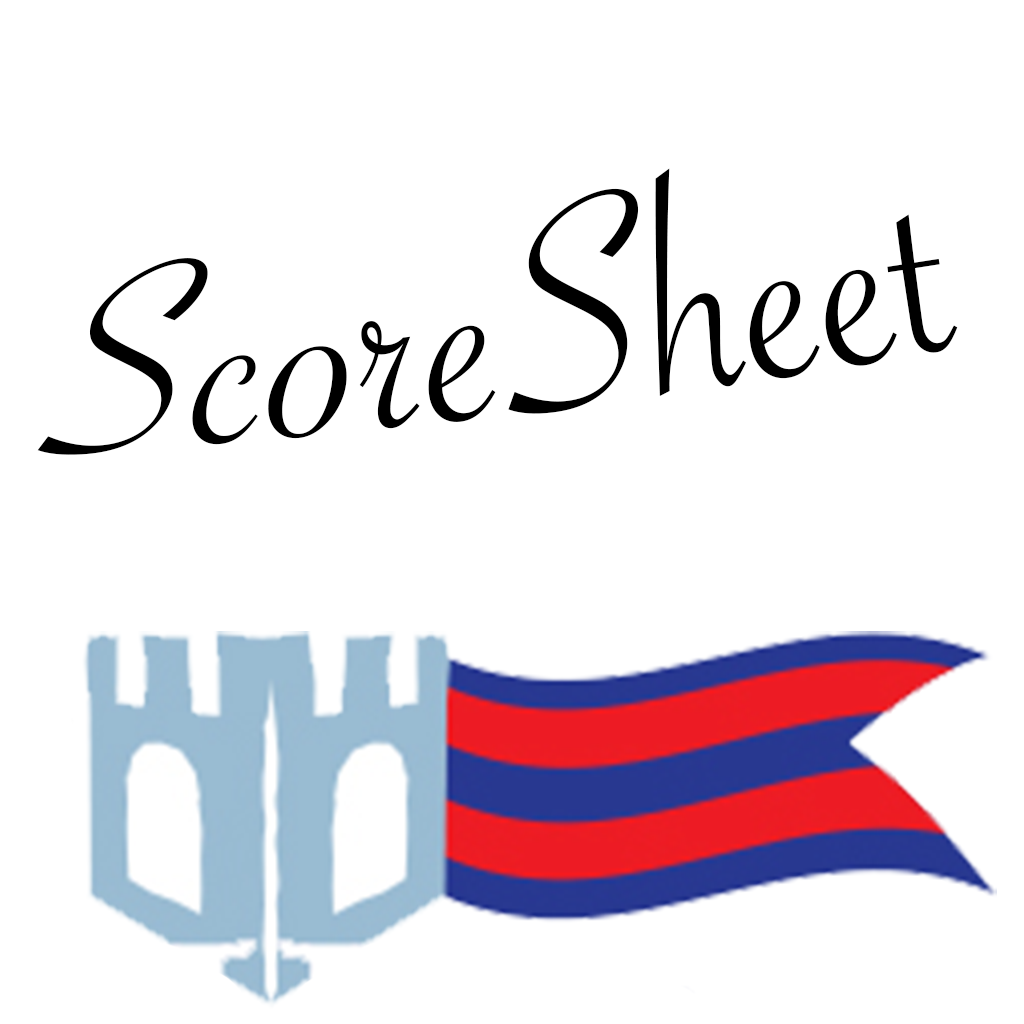
<style>
.page{position:relative;width:1024px;height:1024px;background:#ffffff}
.page>*{position:absolute;margin:0}
.t1{font:296px "SavoyeLetPlain";color:#000000}
</style>
<div class="page">
<p class="t1" style="left:37px;top:168px;width:921px;height:287px;rotate:-8deg">ScoreSheet</p>
</div>
